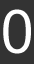
<style>
.page{position:relative;width:34px;height:64px;background:#333333}
.page>*{position:absolute;margin:0}
.t1{font:60px "ArialMT";color:#ffffff}
</style>
<div class="page">
<p class="t1" style="left:3px;top:9px;width:28px;height:45px">0</p>
</div>
